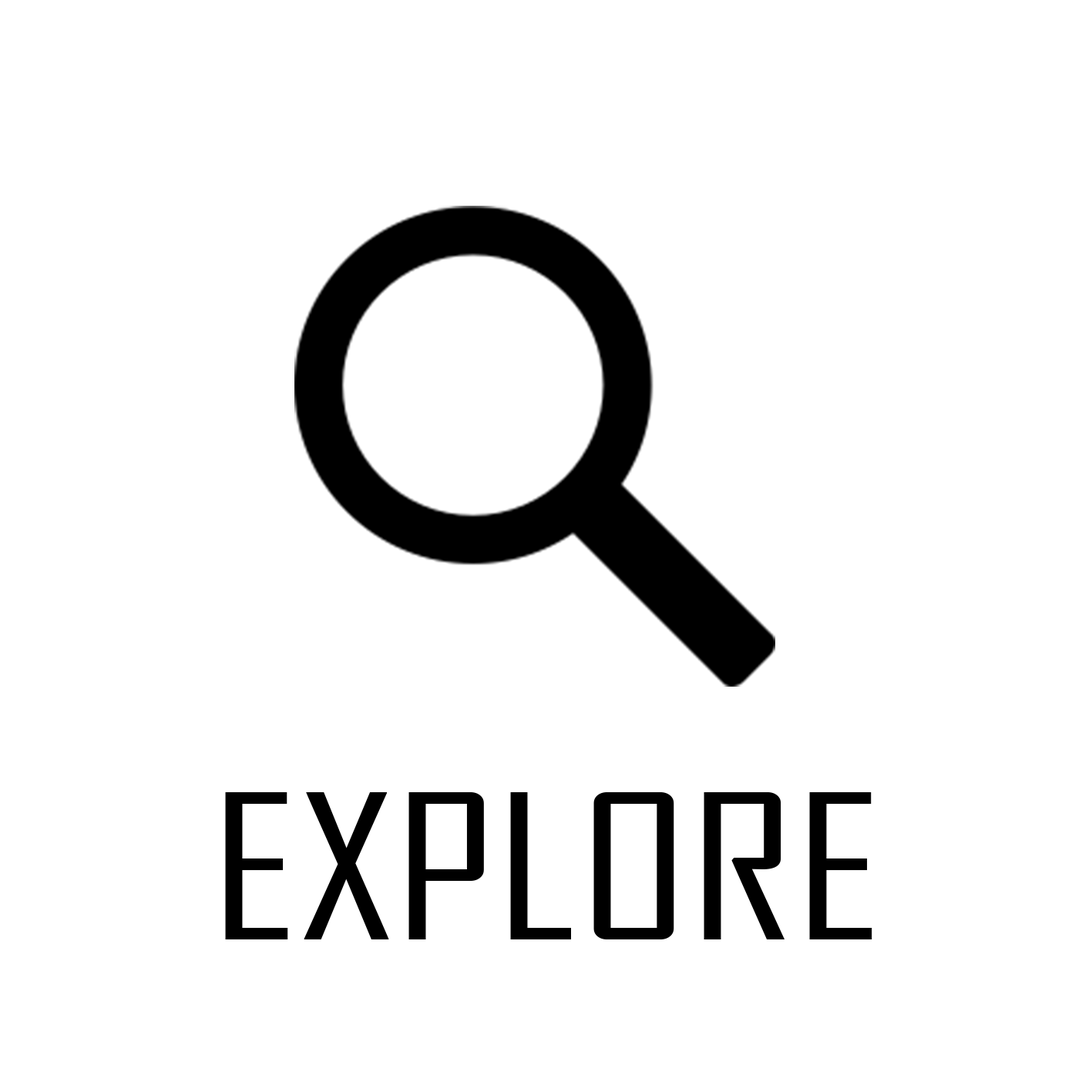
<style>
.page{position:relative;width:1092px;height:1092px;background:#ffffff}
.page>*{position:absolute;margin:0}
.t1{font:192.6px "AgencyFB-Reg";color:#000000;scale:1.29 1}
</style>
<div class="page">
<p class="t1" style="left:225px;top:792px;width:647px;height:147px">EXPLORE</p>
</div>
